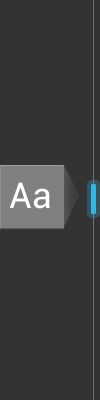
<style>
.page{position:relative;width:100px;height:400px;background:#333333}
.page>*{position:absolute;margin:0}
.t1{font:36px "Roboto-Regular";color:#ffffff}
</style>
<div class="page">
<p class="t1" style="left:9px;top:182px;width:41px;height:27px">Aa</p>
</div>
